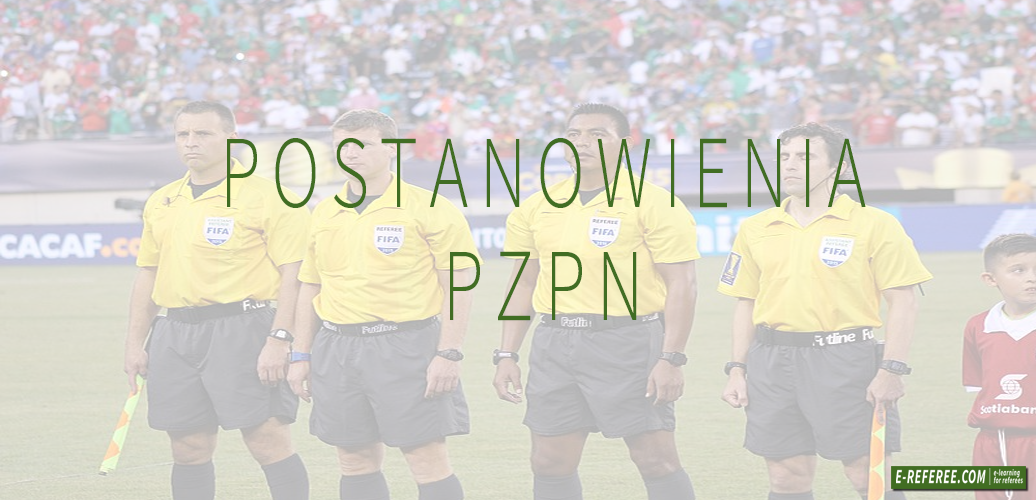
<style>
.page{position:relative;width:1036px;height:500px}
.page>*{position:absolute;margin:0}
.t1{font:103.4px/113.2px "SourceSansPro-Light";letter-spacing:0.16em;color:#416d23;scale:0.71 1}
</style>
<div class="page">
<p class="t1" style="left:227px;top:138px;width:639px;height:183px;text-align:center">POSTANOWIENIA<br>PZPN</p>
</div>
